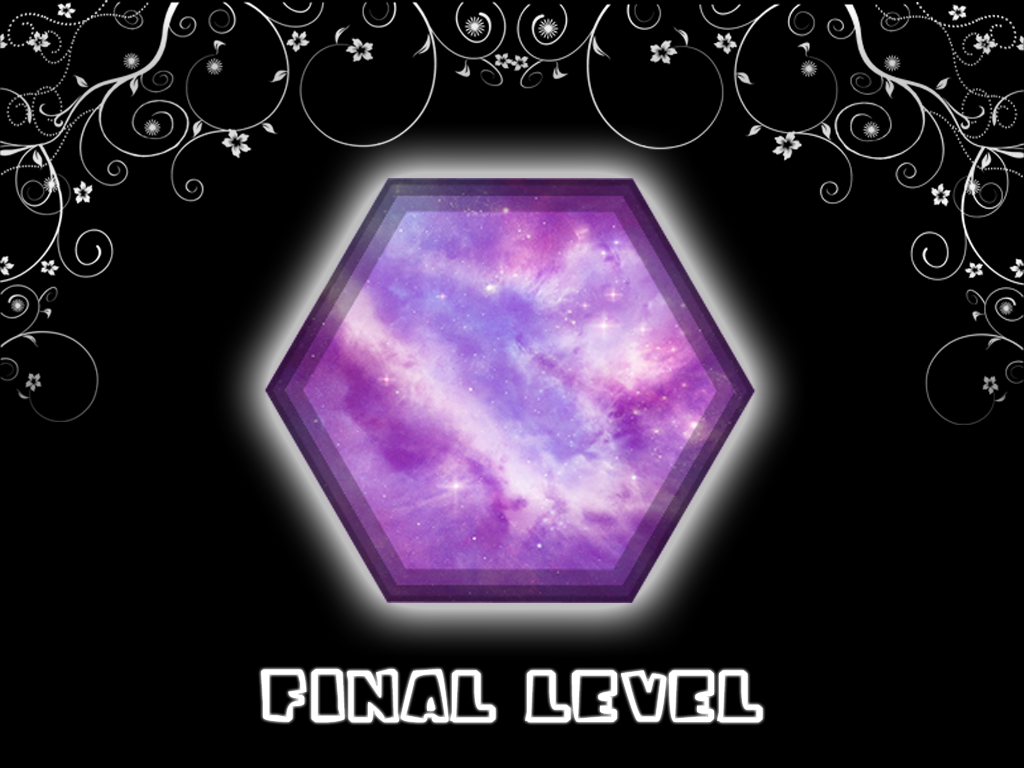
<style>
.page{position:relative;width:1024px;height:768px;background:#000000}
.page>*{position:absolute;margin:0}
.t1{font:109.1px "iceagefont";color:#ffffff;text-transform:uppercase}
</style>
<div class="page">
<p class="t1" style="left:261px;top:669px;width:502px;height:54px">Final Level</p>
</div>
